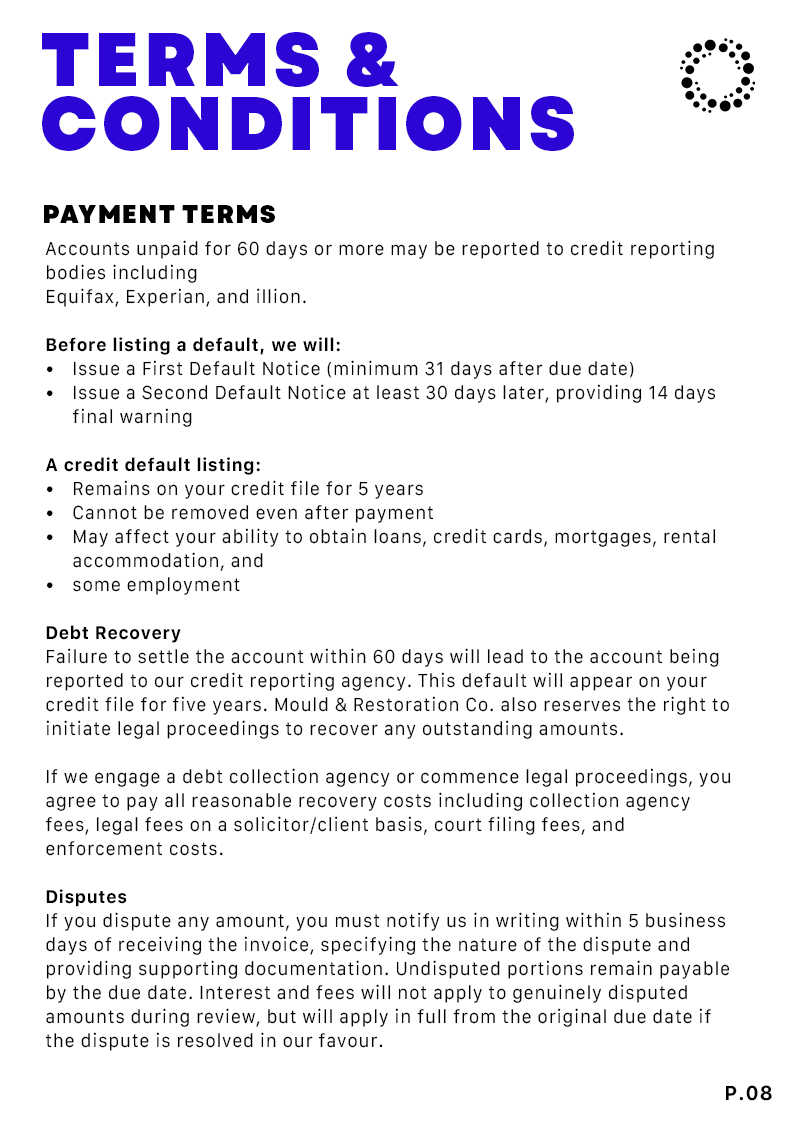
<style>
.page{position:relative;width:793px;height:1123px;background:#ffffff}
.page>*{position:absolute;margin:0}
.t1{font:75px/64px "Garet-Heavy";letter-spacing:0.06em;color:#2c05d4;text-transform:uppercase;scale:0.96 1}
.t2{font:25px "Garet-Heavy";letter-spacing:0.06em;color:#000000;scale:0.96 1}
.t3{font:18px/24px "Galvji";letter-spacing:0.04em;color:#000000;scale:0.96 1}
.t4{font:18px/24px "Galvji-Bold";letter-spacing:0.04em;color:#000000;scale:0.96 1}
.t5{font:20px "Galvji-Bold";letter-spacing:0.04em;color:#000000;scale:0.96 1}
</style>
<div class="page">
<p class="t1" style="left:42px;top:32px;width:532px;height:119px">TERMS &amp;<br>CONDITIONS</p>
<p class="t2" style="left:44px;top:205px;width:231px;height:18px">PAYMENT TERMS</p>
<p class="t3" style="left:45px;top:240px;width:671px;height:355px">Accounts unpaid for 60 days or more may be reported to credit reporting bodies including<br>Equifax, Experian, and illion.<br><span class="t4"><br>Before listing a default, we will:<br></span>Issue a First Default Notice (minimum 31 days after due date)<br>Issue a Second Default Notice at least 30 days later, providing 14 days final warning<br><br><span class="t4">A credit default listing:<br></span>Remains on your credit file for 5 years<br>Cannot be removed even after payment<br>May affect your ability to obtain loans, credit cards, mortgages, rental accommodation, and<br>some employment</p>
<p class="t3" style="left:45px;top:625px;width:686px;height:426px"><span class="t4">Debt Recovery<br></span>Failure to settle the account within 60 days will lead to the account being reported to our credit reporting agency. This default will appear on your credit file for five years. Mould &amp; Restoration Co. also reserves the right to initiate legal proceedings to recover any outstanding amounts.<br><br>If we engage a debt collection agency or commence legal proceedings, you agree to pay all reasonable recovery costs including collection agency fees, legal fees on a solicitor/client basis, court filing fees, and enforcement costs.<br><br><span class="t4">Disputes<br></span>If you dispute any amount, you must notify us in writing within 5 business days of receiving the invoice, specifying the nature of the dispute and providing supporting documentation. Undisputed portions remain payable by the due date. Interest and fees will not apply to genuinely disputed amounts during review, but will apply in full from the original due date if the dispute is resolved in our favour.</p>
<p class="t5" style="left:726px;top:1085px;width:46px;height:16px">P.08</p>
</div>
